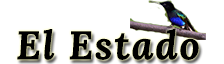
<style>
.page{position:relative;width:224px;height:64px;background:#ffffff}
.page>*{position:absolute;margin:0}
.t1{font:40px "Lora-BoldItalic";letter-spacing:0.04em;color:#000000}
</style>
<div class="page">
<p class="t1" style="left:17px;top:29px;width:182px;height:31px">El Estado</p>
</div>
